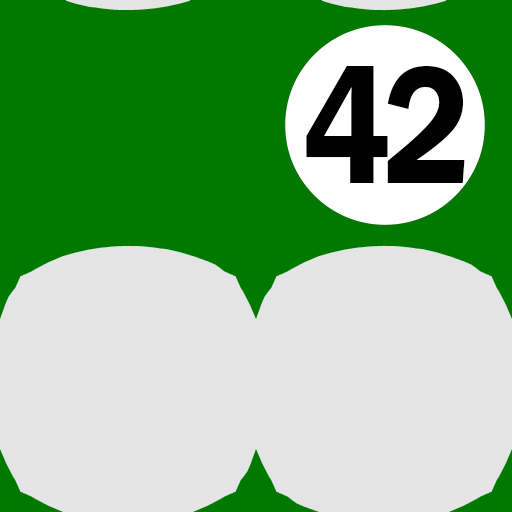
<style>
.page{position:relative;width:512px;height:512px;background:#e4e4e4}
.page>*{position:absolute;margin:0}
.t1{font:172.5px "FranklinGothic-Demi";letter-spacing:-0.05em;color:#010101;scale:0.87 1}
</style>
<div class="page">
<p class="t1" style="left:306px;top:66px;width:159px;height:117px">42</p>
</div>
